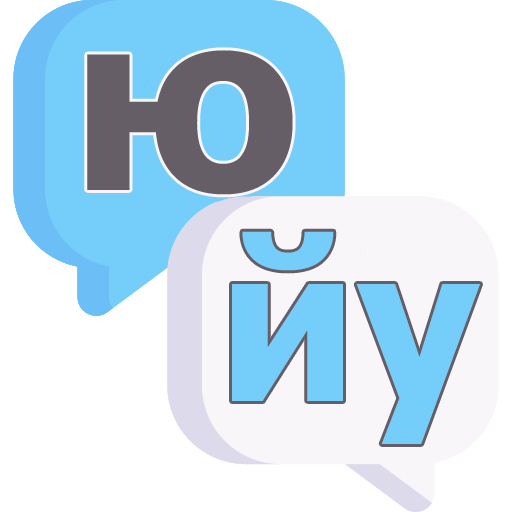
<style>
.page{position:relative;width:512px;height:512px;background:#ffffff}
.page>*{position:absolute;margin:0}
.t1{font:246.7px "Tahoma-Bold";color:#665e66}
.t2{font:213.4px "Tahoma-Bold";color:#75cef9}
</style>
<div class="page">
<p class="t1" style="left:87px;top:50px;width:206px;height:145px">ю</p>
<p class="t2" style="left:232px;top:231px;width:248px;height:213px">йу</p>
</div>
